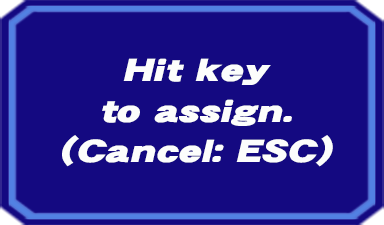
<style>
.page{position:relative;width:384px;height:225px;background:#140981}
.page>*{position:absolute;margin:0}
.t1{font:31.5px/40.5px "DFGothic-UB-WINP-RKSJ-H";color:#fcfdfc;font-style:italic;scale:1.33 1}
</style>
<div class="page">
<p class="t1" style="left:62px;top:58px;width:271px;height:109px;text-align:center">Hit key<br>to assign.<br>(Cancel: ESC)</p>
</div>
